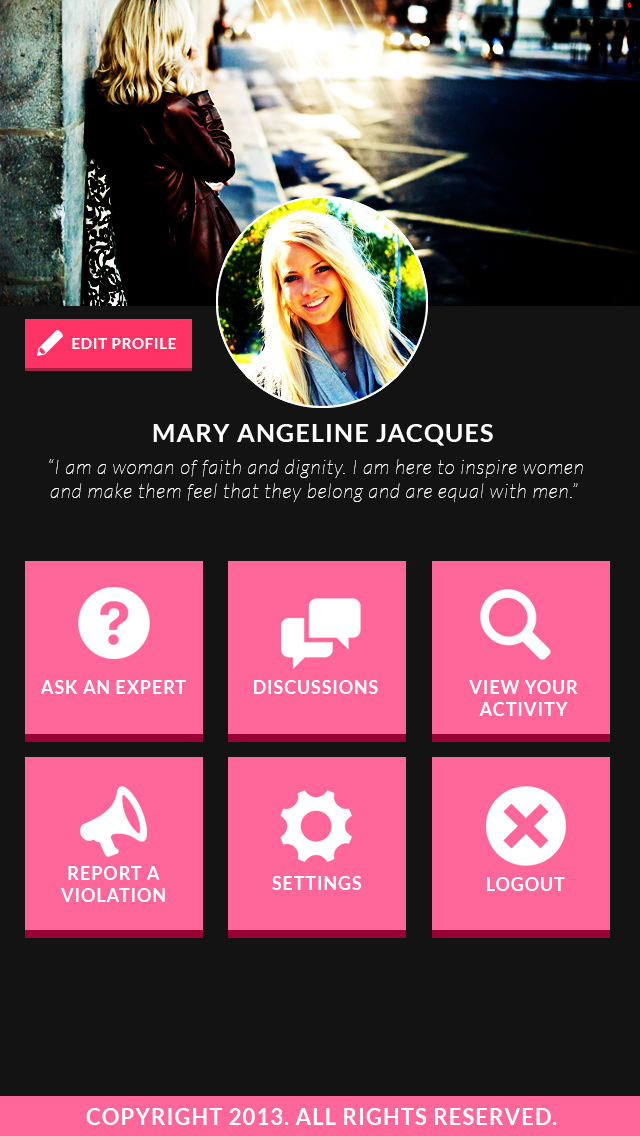
<style>
.page{position:relative;width:640px;height:1136px;background:#131313}
.page>*{position:absolute;margin:0}
.t1{font:15px "Lato-Bold";letter-spacing:0.05em;color:#ffffff}
.t2{font:25px "Lato-Bold";letter-spacing:0.05em;color:#ffffff}
.t3{font:20px "Lato-HairlineItalic";letter-spacing:0.05em;color:#ffffff}
.t4{font:18px "Lato-Bold";letter-spacing:0.05em;color:#ffffff}
.t5{font:22px "Lato-Bold";letter-spacing:0.05em;color:#ffffff}
</style>
<div class="page">
<p class="t1" style="left:72px;top:338px;width:104px;height:11px">EDIT PROFILE</p>
<p class="t2" style="left:153px;top:424px;width:340px;height:22px">MARY ANGELINE JACQUES</p>
<p class="t3" style="left:49px;top:459px;width:534px;height:43px;text-align:center">“I am a woman of faith and dignity. I am here to inspire women<br>and make them feel that they belong and are equal with men.”</p>
<p class="t4" style="left:40px;top:680px;width:146px;height:14px">ASK AN EXPERT</p>
<p class="t4" style="left:254px;top:680px;width:124px;height:14px">DISCUSSIONS</p>
<p class="t4" style="left:469px;top:680px;width:109px;height:36px;text-align:center">VIEW YOUR<br>ACTIVITY</p>
<p class="t4" style="left:61px;top:866px;width:104px;height:36px;text-align:center">REPORT A<br>VIOLATION</p>
<p class="t4" style="left:272px;top:876px;width:90px;height:14px">SETTINGS</p>
<p class="t4" style="left:487px;top:877px;width:78px;height:14px">LOGOUT</p>
<p class="t5" style="left:86px;top:1108px;width:471px;height:17px">COPYRIGHT 2013. ALL RIGHTS RESERVED.</p>
</div>
